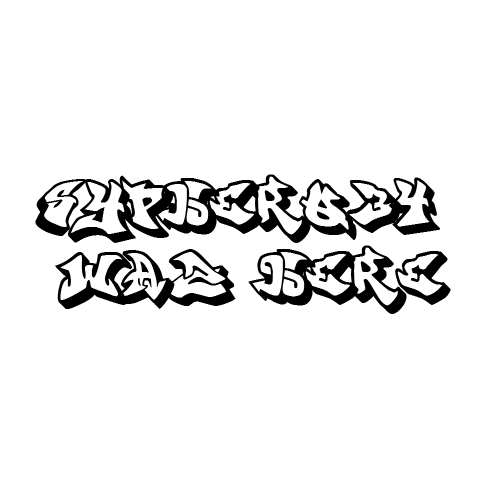
<style>
.page{position:relative;width:500px;height:500px;background:#ffffff}
.page>*{position:absolute;margin:0}
.t1{font:58.6px "graffonti.3Ddrop";letter-spacing:-0.02em;color:#000000}
</style>
<div class="page">
<p class="t1" style="left:35px;top:174px;width:416px;height:140px;text-align:center">Sypher034 <br>waz here</p>
</div>
